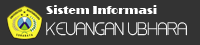
<style>
.page{position:relative;width:200px;height:45px;background:#333333}
.page>*{position:absolute;margin:0}
.t1{font:12px "Broadway";color:#ffffff}
.t2{font:15px "Steiner";scale:0.92 1}
</style>
<div class="page">
<p class="t1" style="left:46px;top:5px;width:111px;height:9px">Sistem Informasi</p>
<p class="t2" style="left:46px;top:22px;width:141px;height:14px">KEUANGAN UBHARA</p>
</div>
